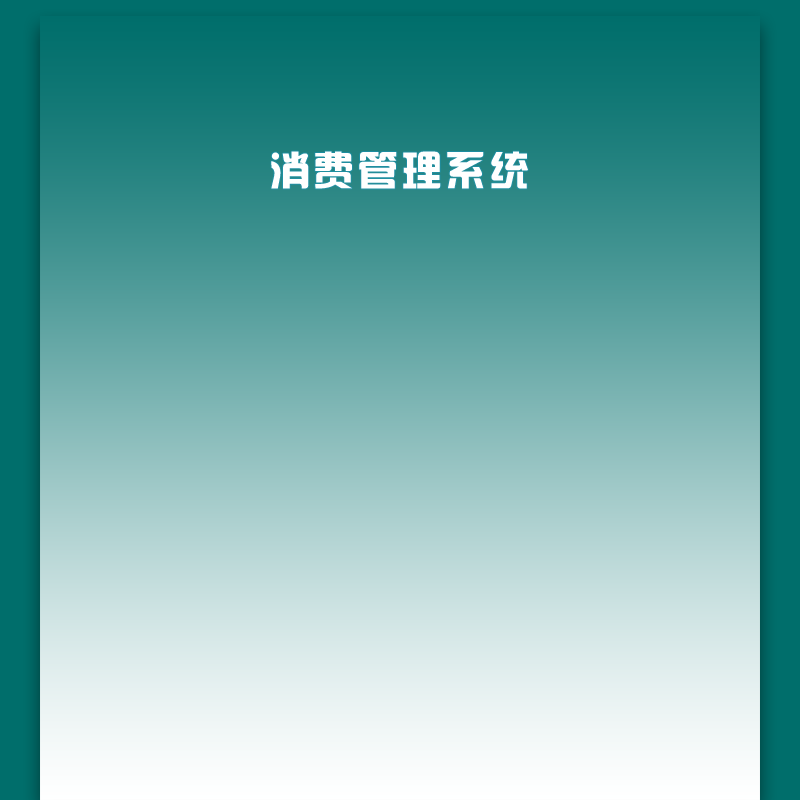
<style>
.page{position:relative;width:800px;height:800px}
.page>*{position:absolute;margin:0}
.t1{font:40px "hzgb";letter-spacing:0.1em;color:#ffffff}
</style>
<div class="page">
<p class="t1" style="left:271px;top:151px;width:257px;height:38px">消费管理系统</p>
</div>
